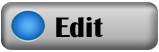
<style>
.page{position:relative;width:159px;height:52px}
.page>*{position:absolute;margin:0}
.t1{font:29.2px "BritannicBold";color:#000000}
</style>
<div class="page">
<p class="t1" style="left:56px;top:17px;width:47px;height:21px">Edit</p>
</div>
